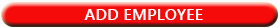
<style>
.page{position:relative;width:280px;height:28px;background:#f60b0b}
.page>*{position:absolute;margin:0}
.t1{font:16.4px "YuGothicUI-Bold";color:#ffffff}
</style>
<div class="page">
<p class="t1" style="left:84px;top:9px;width:119px;height:11px">ADD EMPLOYEE</p>
</div>
